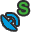
<style>
.page{position:relative;width:32px;height:32px;background:#ffffff}
.page>*{position:absolute;margin:0}
.t1{font:16.7px "Arial-BoldMT";color:#41ae3b}
</style>
<div class="page">
<p class="t1" style="left:18px;top:2px;width:11px;height:13px">S</p>
</div>
